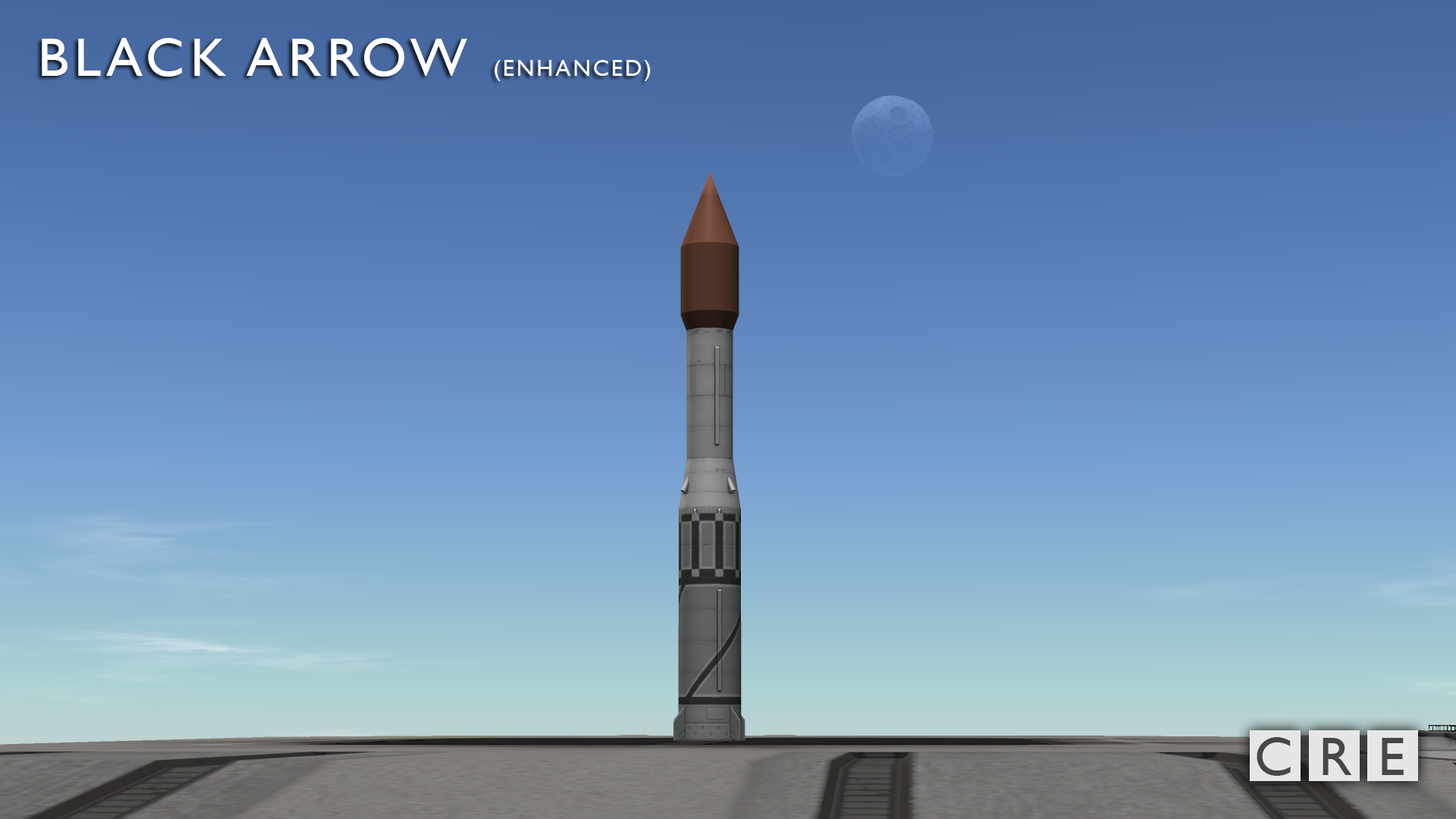
<style>
.page{position:relative;width:1456px;height:819px}
.page>*{position:absolute;margin:0}
.t1{font:54.6px "GillSansMT";letter-spacing:0.1em;color:#ffffff}
.t2{font:22.7px "GillSansMT";letter-spacing:0.1em;color:#ffffff}
.t3{font:54.6px "GillSansMT";letter-spacing:0.1em;color:#474747}
</style>
<div class="page">
<p class="t1" style="left:42px;top:38px;width:609px;height:43px">BLACK ARROW <span class="t2">(ENHANCED)</span></p>
<p class="t3" style="left:1257px;top:737px;width:147px;height:39px">C R E</p>
</div>
